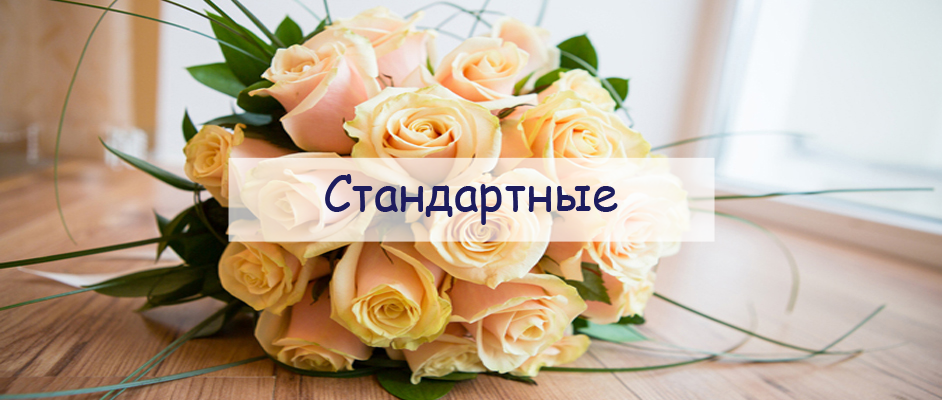
<style>
.page{position:relative;width:942px;height:400px}
.page>*{position:absolute;margin:0}
.t1{font:48px "ComicSansMS";color:#1d1c5e}
</style>
<div class="page">
<p class="t1" style="left:325px;top:174px;width:293px;height:51px">Стандартные</p>
</div>
